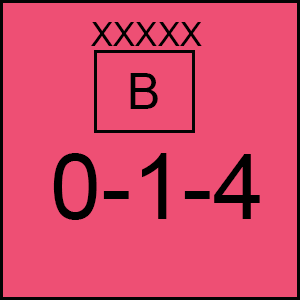
<style>
.page{position:relative;width:300px;height:300px;background:#ee4f74}
.page>*{position:absolute;margin:0}
.t1{font:33.3px "ArialMT";color:#000000}
.t2{font:50px "ArialMT";color:#000000}
.t3{font:91.7px "ArialMT";color:#000000}
</style>
<div class="page">
<p class="t1" style="left:91px;top:22px;width:111px;height:24px">XXXXX</p>
<p class="t2" style="left:130px;top:73px;width:28px;height:36px">B</p>
<p class="t3" style="left:53px;top:153px;width:207px;height:67px">0-1-4</p>
</div>
